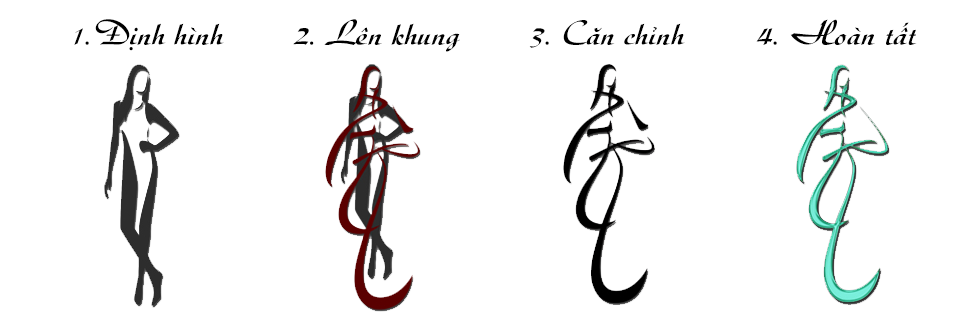
<style>
.page{position:relative;width:970px;height:315px;background:#ffffff}
.page>*{position:absolute;margin:0}
.t1{font:36px "UVNThuTu";color:#000000}
</style>
<div class="page">
<p class="t1" style="left:74px;top:19px;width:150px;height:32px">1.Định hình</p>
<p class="t1" style="left:293px;top:19px;width:167px;height:33px">2. Lên khung</p>
<p class="t1" style="left:529px;top:20px;width:156px;height:28px">3. Căn chỉnh</p>
<p class="t1" style="left:756px;top:19px;width:161px;height:26px">4. Hoàn tất</p>
</div>
